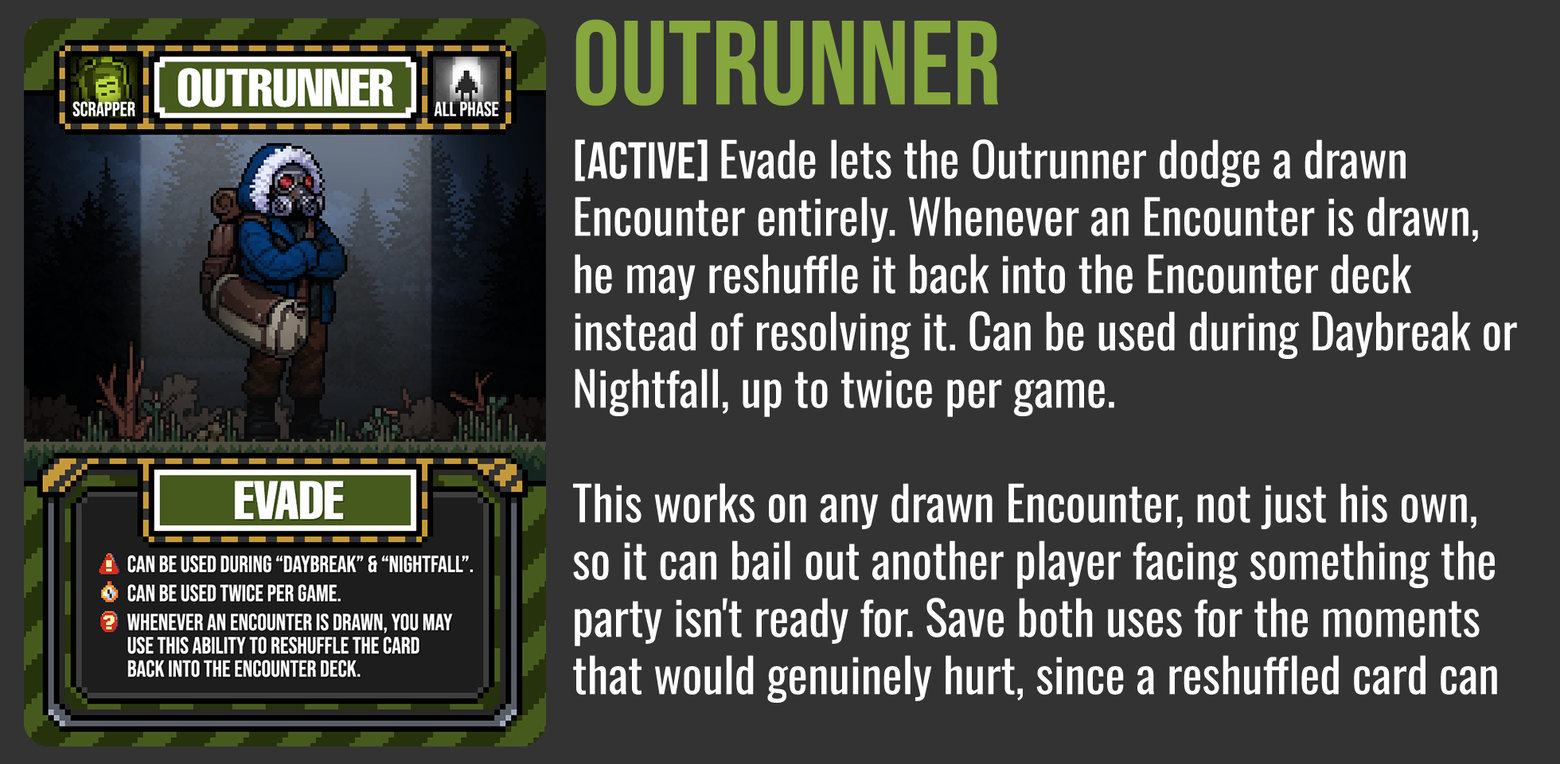
<style>
.page{position:relative;width:1560px;height:764px;background:#333333}
.page>*{position:absolute;margin:0}
.t1{font:119.4px "BebasNeue-Regular";color:#85a73d}
.t2{font:47.8px "Oswald-Regular";color:#ffffff}
.t3{font:51.7px "BebasNeue-Regular";color:#ffffff}
</style>
<div class="page">
<p class="t1" style="left:576px;top:19px;width:423px;height:87px">OUTRUNNER</p>
<p class="t2" style="left:573px;top:139px;width:944px;height:564px"><span class="t3">[aCTIVE] </span>Evade lets the Outrunner dodge a drawn Encounter entirely. Whenever an Encounter is drawn, he may reshuffle it back into the Encounter deck instead of resolving it. Can be used during Daybreak or Nightfall, up to twice per game.<br><br>This works on any drawn Encounter, not just his own, so it can bail out another player facing something the party isn't ready for. Save both uses for the moments that would genuinely hurt, since a reshuffled card can always come back around later.</p>
</div>
